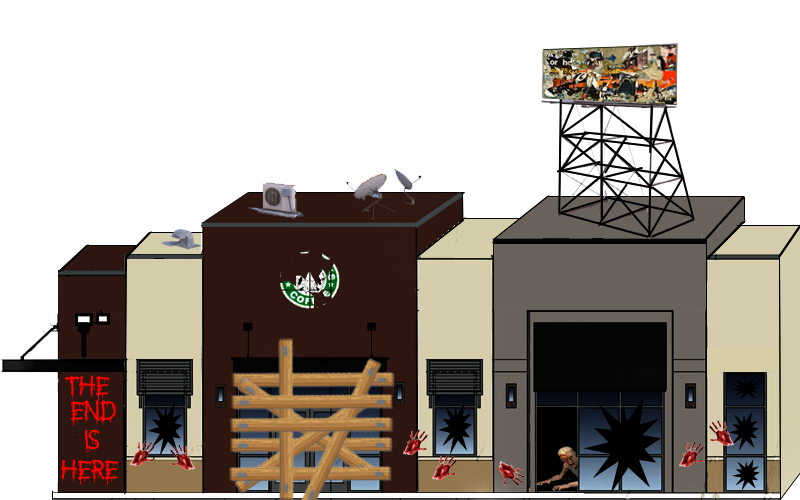
<style>
.page{position:relative;width:800px;height:500px;background:#ffffff}
.page>*{position:absolute;margin:0}
.t1{font:32.4px "Anti-Everything";color:#ff0000}
</style>
<div class="page">
<p class="t1" style="left:65px;top:375px;width:45px;height:26px">the</p>
<p class="t1" style="left:71px;top:400px;width:45px;height:26px">end</p>
<p class="t1" style="left:85px;top:429px;width:15px;height:24px">is</p>
<p class="t1" style="left:61px;top:459px;width:58px;height:26px">here</p>
</div>
